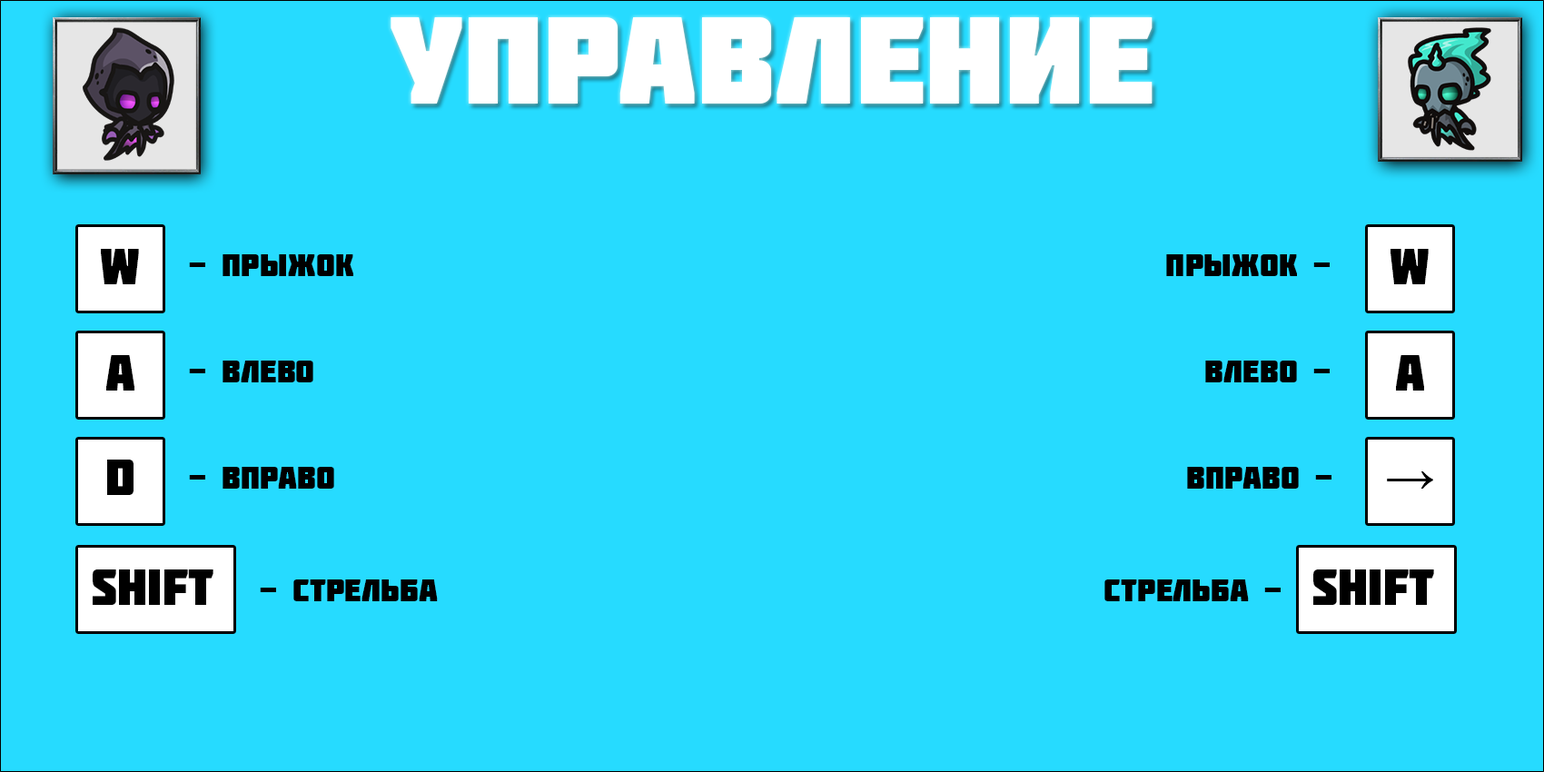
<style>
.page{position:relative;width:1544px;height:772px;background:#26dbff}
.page>*{position:absolute;margin:0}
.t1{font:123.8px "Molot";color:#ffffff;scale:1.07 1}
.t2{font:50px "Molot";color:#000000}
.t3{font:31.8px "Molot";color:#000000}
.t4{font:50px "Tahoma";color:#000000}
</style>
<div class="page">
<p class="t1" style="left:391px;top:17px;width:762px;height:87px">управление</p>
<p class="t2" style="left:101px;top:249px;width:38px;height:35px">w</p>
<p class="t3" style="left:189px;top:254px;width:164px;height:22px">- прыжок</p>
<p class="t3" style="left:1166px;top:254px;width:164px;height:22px">прыжок -</p>
<p class="t2" style="left:1391px;top:249px;width:38px;height:35px">w</p>
<p class="t2" style="left:106px;top:355px;width:28px;height:36px">a</p>
<p class="t3" style="left:189px;top:361px;width:124px;height:21px">- влево</p>
<p class="t3" style="left:1205px;top:361px;width:125px;height:21px">влево -</p>
<p class="t2" style="left:1396px;top:355px;width:28px;height:36px">a</p>
<p class="t2" style="left:107px;top:460px;width:27px;height:35px">d</p>
<p class="t3" style="left:189px;top:467px;width:145px;height:22px">- вправо</p>
<p class="t3" style="left:1187px;top:467px;width:145px;height:22px">вправо -</p>
<p class="t4" style="left:1387px;top:471px;width:46px;height:18px">→</p>
<p class="t2" style="left:93px;top:570px;width:120px;height:35px">shift</p>
<p class="t2" style="left:1314px;top:570px;width:120px;height:35px">shift</p>
<p class="t3" style="left:260px;top:580px;width:178px;height:21px">- стрельба</p>
<p class="t3" style="left:1105px;top:580px;width:176px;height:21px">стрельба -</p>
</div>
